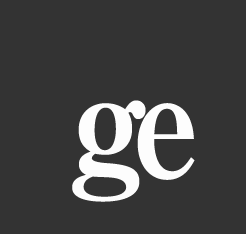
<style>
.page{position:relative;width:246px;height:234px;background:#333333}
.page>*{position:absolute;margin:0}
.t1{font:150px "RyuminPro-ExBold";letter-spacing:-0.08em;color:#fdfdfd;scale:0.9 1}
</style>
<div class="page">
<p class="t1" style="left:72px;top:100px;width:123px;height:102px">ge</p>
</div>
